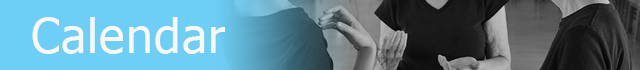
<style>
.page{position:relative;width:640px;height:70px;background:#6dcff6}
.page>*{position:absolute;margin:0}
.t1{font:48px "Tahoma";letter-spacing:0.025em;color:#fbf7f7}
</style>
<div class="page">
<p class="t1" style="left:32px;top:17px;width:193px;height:37px">Calendar</p>
</div>
